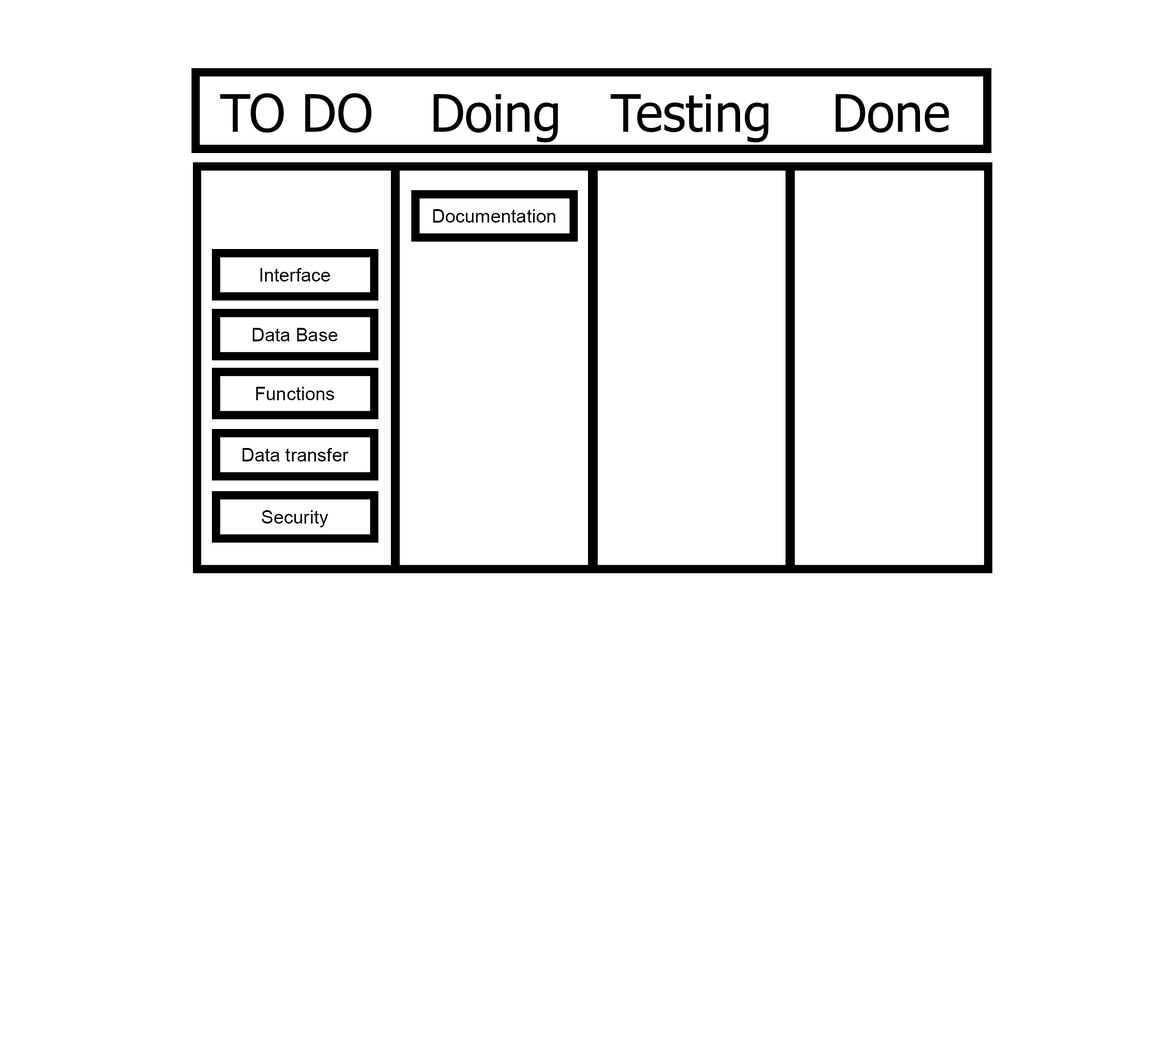
<style>
.page{position:relative;width:1150px;height:1037px;background:#ffffff}
.page>*{position:absolute;margin:0}
.t1{font:51.3px "Tahoma";color:#000000}
.t2{font:18.4px "ArialMT";color:#000000}
</style>
<div class="page">
<p class="t1" style="left:220px;top:93px;width:151px;height:40px">TO DO</p>
<p class="t1" style="left:434px;top:94px;width:124px;height:48px">Doing</p>
<p class="t1" style="left:610px;top:94px;width:158px;height:48px">Testing</p>
<p class="t1" style="left:836px;top:94px;width:113px;height:39px">Done</p>
<p class="t2" style="left:433px;top:209px;width:123px;height:14px">Documentation</p>
<p class="t2" style="left:260px;top:268px;width:70px;height:13px">Interface</p>
<p class="t2" style="left:253px;top:328px;width:85px;height:13px">Data Base</p>
<p class="t2" style="left:256px;top:387px;width:78px;height:13px">Functions</p>
<p class="t2" style="left:243px;top:448px;width:106px;height:13px">Data transfer</p>
<p class="t2" style="left:262px;top:510px;width:66px;height:17px">Security</p>
</div>
